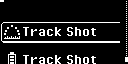
<style>
.page{position:relative;width:128px;height:64px;background:#000000}
.page>*{position:absolute;margin:0}
.t1{font:16px "PixelOperator-Bold";color:#ffffff}
</style>
<div class="page">
<p class="t1" style="left:23px;top:27px;width:73px;height:9px">Track Shot</p>
<p class="t1" style="left:23px;top:55px;width:73px;height:9px">Track Shot</p>
</div>
